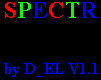
<style>
.page{position:relative;width:101px;height:80px;background:#000000}
.page>*{position:absolute;margin:0}
.t1{font:24px "TimesNewRomanPS-BoldMT";color:#ff0000}
.t2{font:24px "TimesNewRomanPS-BoldMT";color:#00ff00}
.t3{font:24px "TimesNewRomanPS-BoldMT";color:#0000ff}
.t4{font:16px "TimesNewRomanPS-BoldMT";color:#0000ff}
</style>
<div class="page">
<p class="t1" style="left:5px;top:2px;width:93px;height:16px">S<span class="t2">P</span><span class="t3">E</span>C<span class="t2">T</span><span class="t3">R</span></p>
<p class="t4" style="left:4px;top:63px;width:94px;height:14px">by D_EL V1.1</p>
</div>
